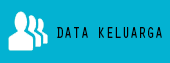
<style>
.page{position:relative;width:170px;height:63px;background:#03b2d2}
.page>*{position:absolute;margin:0}
.t1{font:19.7px "OratorStd";color:#020202;scale:0.7 1}
</style>
<div class="page">
<p class="t1" style="left:57px;top:27px;width:105px;height:11px">data keluarga</p>
</div>
